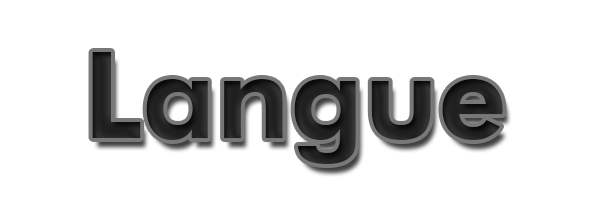
<style>
.page{position:relative;width:600px;height:200px;background:#ffffff}
.page>*{position:absolute;margin:0}
.t1{font:120px "FuturaBT-Heavy";color:#212121}
</style>
<div class="page">
<p class="t1" style="left:92px;top:52px;width:411px;height:112px">Langue</p>
</div>
